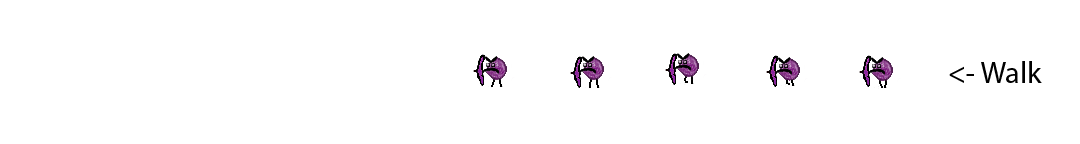
<style>
.page{position:relative;width:1080px;height:144px;background:#ffffff}
.page>*{position:absolute;margin:0}
.t1{font:12px "MyriadPro-Regular";color:#000000}
</style>
<div class="page">
<p class="t1" style="left:949px;top:61px;width:93px;height:22px">&lt;- Walk</p>
</div>
